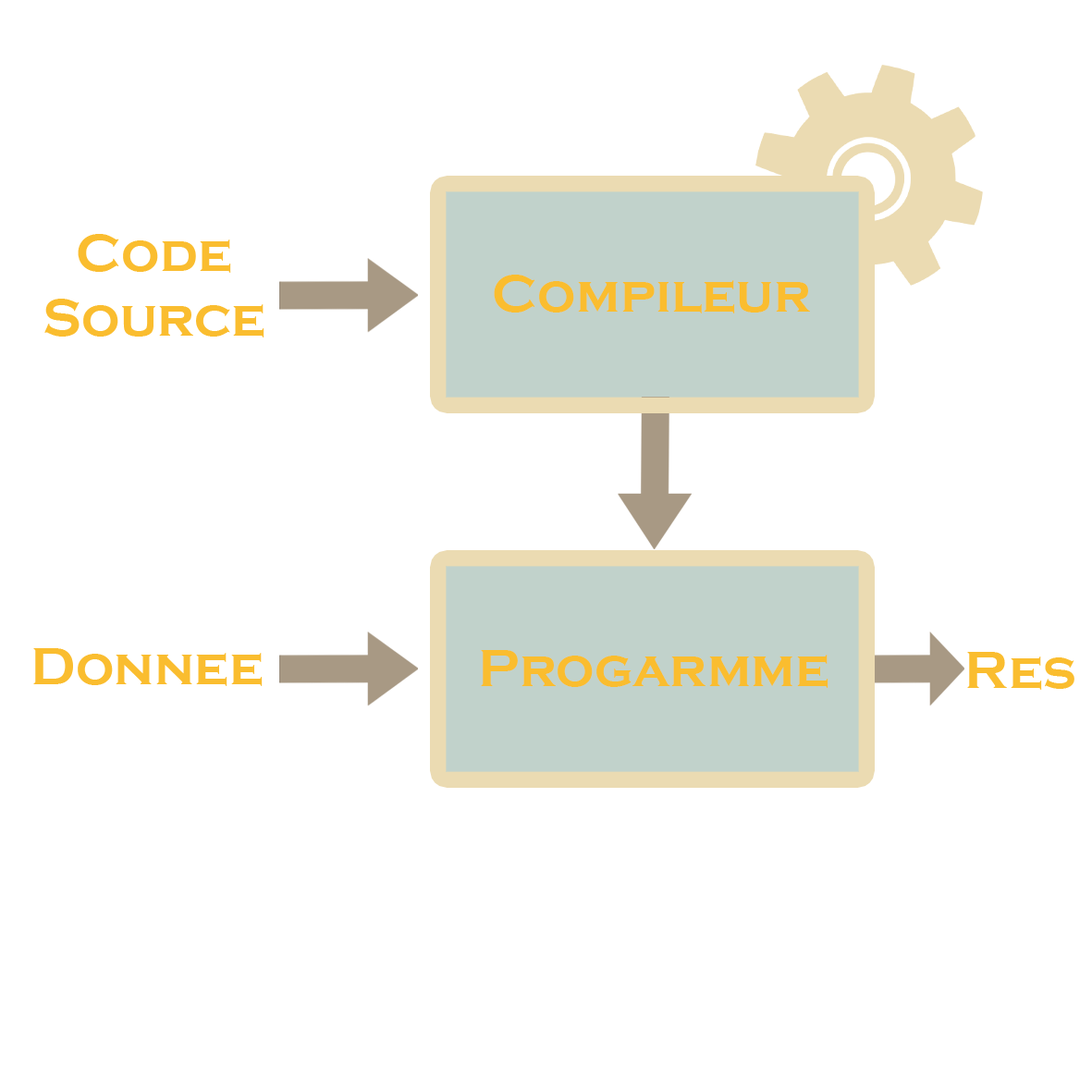
<style>
.page{position:relative;width:1092px;height:1092px;background:#ffffff}
.page>*{position:absolute;margin:0}
.t1{font:53.9px "CopperplateGothic-Bold";color:#fabd2f}
</style>
<div class="page">
<p class="t1" style="left:44px;top:234px;width:220px;height:103px;text-align:center">Code<br>Source</p>
<p class="t1" style="left:494px;top:275px;width:316px;height:38px">Compileur</p>
<p class="t1" style="left:33px;top:648px;width:230px;height:38px">Donnee</p>
<p class="t1" style="left:481px;top:650px;width:347px;height:38px">Progarmme</p>
<p class="t1" style="left:967px;top:652px;width:107px;height:38px">Res</p>
</div>
